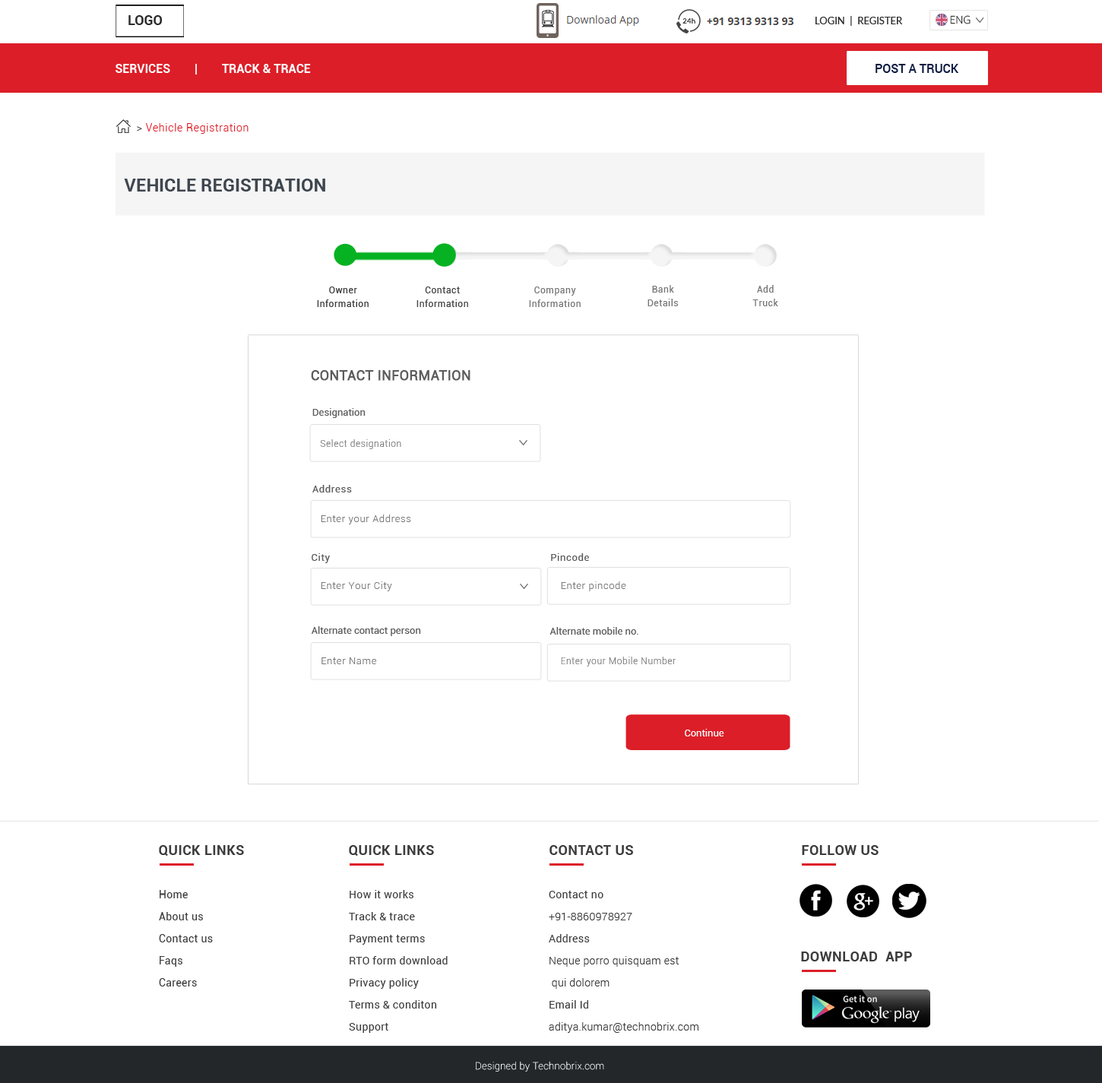
<style>
.page{position:relative;width:1102px;height:1083px;background:#ffffff}
.page>*{position:absolute;margin:0}
.t1{font:13.7px "Roboto-Bold";color:#2c2c2c}
.t2{font:9.9px "Lato-Regular";color:#2c2c2c;text-transform:uppercase}
.t3{font:10.6px "OpenSans-Light";color:#2c2c2c}
.t4{font:12.2px "Roboto-Bold";color:#ffffff;text-transform:uppercase}
.t5{font:12.2px "Roboto-Medium";color:#0d1a41}
.t6{font:10.6px "Roboto-Light";letter-spacing:0.05em;color:#dc1e28}
.t7{font:10.6px "Roboto-Light";letter-spacing:0.05em;color:#3f464e}
.t8{font:18.2px "Roboto-Bold";color:#3f464e;text-transform:uppercase}
.t9{font:9.1px/13.7px "Roboto-Regular";letter-spacing:0.05em;color:#3c3c3c}
.t10{font:9.1px/13.7px "Roboto-Regular";letter-spacing:0.05em;color:#444444}
.t11{font:9.1px/13.7px "Roboto-Regular";letter-spacing:0.05em;color:#777777}
.t12{font:13.7px "Roboto-Regular";color:#5c5c5c;font-weight:bold}
.t13{font:9.9px "Roboto-Regular";color:#5c5c5c}
.t14{font:9.1px "Roboto-Light";letter-spacing:0.05em;color:#777777}
.t15{font:9.9px "Roboto-Regular";letter-spacing:0.05em;color:#5c5c5c}
.t16{font:9.9px "Roboto-Light";letter-spacing:0.05em;color:#777777}
.t17{font:9.9px "Roboto-Regular";color:#ffffff}
.t18{font:13.7px "Roboto-Bold";letter-spacing:0.025em;color:#3c3c3c}
.t19{font:10.6px/22px "Roboto-Regular";letter-spacing:0.025em;color:#3c3c3c}
.t20{font:10.6px/22px "Roboto-Light";letter-spacing:0.025em;color:#3c3c3c}
.t21{font:9.9px "Roboto-Thin";letter-spacing:0.025em;color:#ffffff}
</style>
<div class="page">
<p class="t1" style="left:128px;top:15px;width:34px;height:10px">LOGO</p>
<p class="t2" style="left:815px;top:16px;width:87px;height:10px">Login  |  Register</p>
<p class="t3" style="left:950px;top:15px;width:20px;height:9px">ENG</p>
<p class="t4" style="left:115px;top:64px;width:196px;height:10px">Services        |        Track &amp; TraCe</p>
<p class="t5" style="left:875px;top:64px;width:84px;height:9px">POST A TRUCK</p>
<p class="t6" style="left:137px;top:123px;width:111px;height:11px"><span class="t7">&gt; </span>Vehicle Registration</p>
<p class="t8" style="left:124px;top:179px;width:201px;height:12px">Vehicle Registration</p>
<p class="t9" style="left:317px;top:286px;width:51px;height:21px;text-align:center">Owner<br>Information</p>
<p class="t10" style="left:416px;top:286px;width:52px;height:21px;text-align:center">Contact<br>Information</p>
<p class="t11" style="left:529px;top:286px;width:51px;height:21px;text-align:center">Company<br>Information</p>
<p class="t11" style="left:647px;top:285px;width:31px;height:21px;text-align:center">Bank<br>Details</p>
<p class="t11" style="left:752px;top:285px;width:26px;height:21px;text-align:center">Add<br>Truck</p>
<p class="t12" style="left:311px;top:370px;width:159px;height:11px">CONTACT INFORMATION</p>
<p class="t13" style="left:312px;top:408px;width:53px;height:10px">Designation</p>
<p class="t14" style="left:320px;top:439px;width:81px;height:10px">Select designation</p>
<p class="t15" style="left:312px;top:485px;width:40px;height:7px">Address</p>
<p class="t16" style="left:321px;top:514px;width:90px;height:10px">Enter your Address</p>
<p class="t15" style="left:311px;top:553px;width:19px;height:10px">City</p>
<p class="t15" style="left:551px;top:553px;width:38px;height:8px">Pincode</p>
<p class="t16" style="left:321px;top:581px;width:71px;height:10px">Enter Your City</p>
<p class="t16" style="left:561px;top:581px;width:65px;height:10px">Enter pincode</p>
<p class="t13" style="left:311px;top:626px;width:110px;height:10px"><span class="t15"> </span>Alternate contact person</p>
<p class="t13" style="left:549px;top:627px;width:89px;height:7px"><span class="t15"> </span>Alternate mobile no.</p>
<p class="t16" style="left:321px;top:657px;width:55px;height:7px">Enter Name</p>
<p class="t14" style="left:561px;top:656px;width:114px;height:10px">Enter your Mobile Number</p>
<p class="t17" style="left:684px;top:729px;width:40px;height:7px">Continue</p>
<p class="t18" style="left:159px;top:845px;width:85px;height:10px">QUICK LINKS</p>
<p class="t18" style="left:349px;top:845px;width:85px;height:10px">QUICK LINKS</p>
<p class="t18" style="left:549px;top:845px;width:84px;height:10px">CONTACT US</p>
<p class="t18" style="left:801px;top:845px;width:77px;height:10px">FOLLOW US</p>
<p class="t19" style="left:159px;top:890px;width:54px;height:96px">Home<br>About us <br>Contact us<br>Faqs<br>Careers</p>
<p class="t19" style="left:349px;top:890px;width:98px;height:142px">How it works<br>Track &amp; trace<br>Payment terms<br>RTO form download<br>Privacy policy <br>Terms &amp; conditon<br>Support</p>
<p class="t20" style="left:548px;top:890px;width:150px;height:142px"><span class="t19">Contact no<br></span>+91-8860978927<br><span class="t19">Address<br></span>Neque porro quisquam est<br> qui dolorem<br><span class="t19">Email Id<br></span>aditya.kumar@technobrix.com</p>
<p class="t18" style="left:801px;top:951px;width:111px;height:10px">DOWNLOAD  APP</p>
<p class="t21" style="left:476px;top:1061px;width:128px;height:10px">Designed by Technobrix.com</p>
</div>
